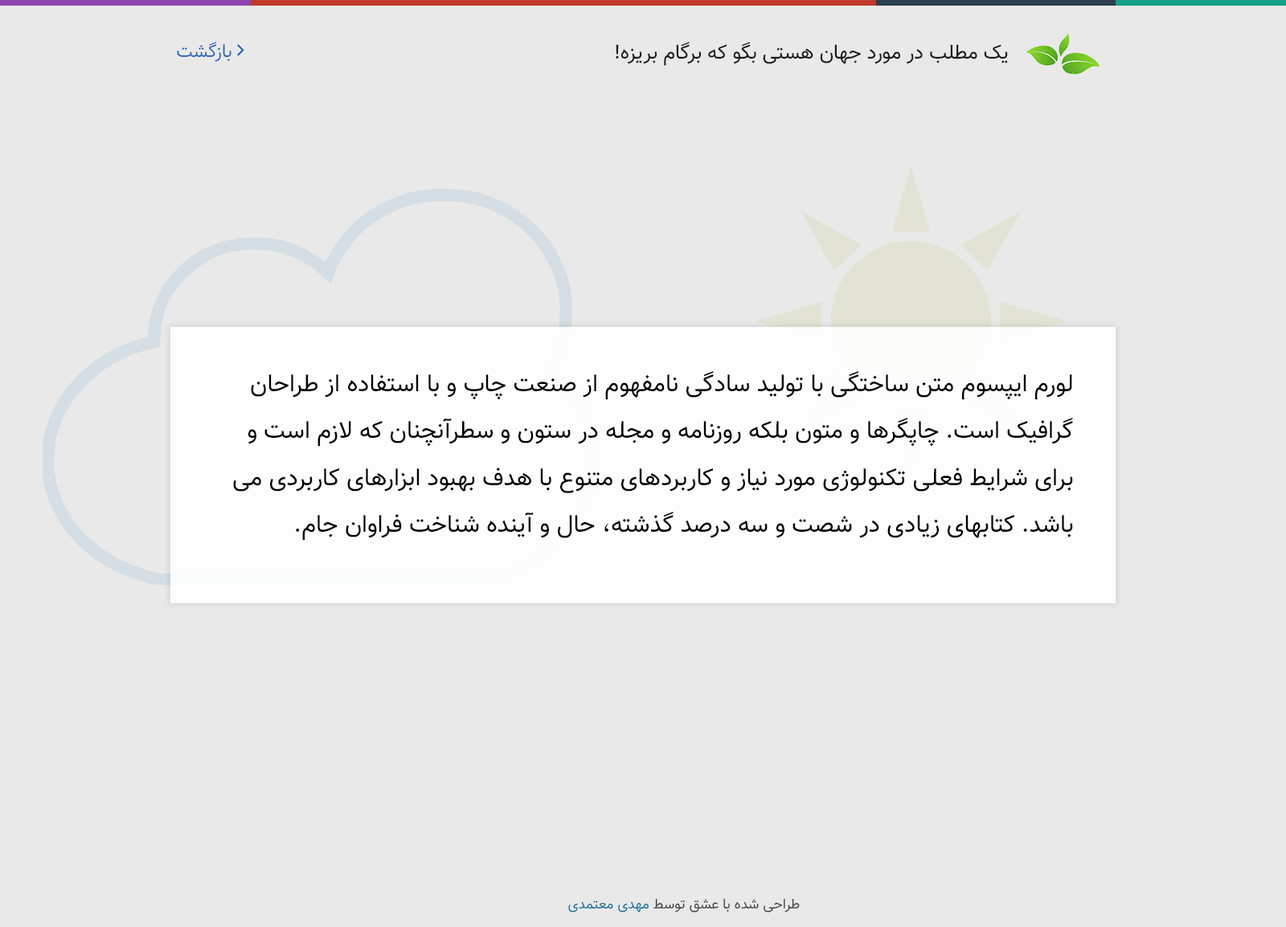
<style>
.page{position:relative;width:1286px;height:927px;background:#e9e9e9}
.page>*{position:absolute;margin:0}
.t1{font:20.1px "Vazir";color:#191919}
.t2{font:24.1px/46.9px "Vazir";color:#000000}
.t3{font:14.2px "Vazir-Light";color:#3d3d3d}
.t4{font:14.2px "Vazir-Light";color:#086c9b}
</style>
<div class="page">
<p class="t1" style="left:616px;top:42px;width:392px;height:24px">یک مطلب در مورد جهان هستی بگو که برگام بریزه!</p>
<p class="t2" style="left:233px;top:371px;width:840px;height:170px">لورم ایپسوم متن ساختگی با تولید سادگی نامفهوم از صنعت چاپ و با استفاده از طراحان گرافیک است. چاپگرها و متون بلکه روزنامه و مجله در ستون و سطرآنچنان که لازم است و برای شرایط فعلی تکنولوژی مورد نیاز و کاربردهای متنوع با هدف بهبود ابزارهای کاربردی می باشد. کتابهای زیادی در شصت و سه درصد گذشته، حال و آینده شناخت فراوان جام.</p>
<p class="t3" style="left:568px;top:898px;width:232px;height:15px">طراحی شده با عشق توسط <span class="t4">مهدی معتمدی</span></p>
</div>
